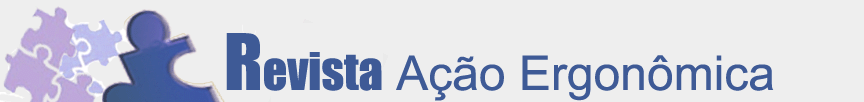
<style>
.page{position:relative;width:864px;height:102px;background:#eeeeee}
.page>*{position:absolute;margin:0}
.t1{font:48px "ArialMT";color:#3e5a96}
.t2{font:72px "Impact";color:#3e5a96}
.t3{font:48px "Impact";color:#3e5a96}
</style>
<div class="page">
<p class="t1" style="left:226px;top:33px;width:548px;height:68px"><span class="t2">R</span><span class="t3">evista</span> Ação Ergonômica</p>
</div>
